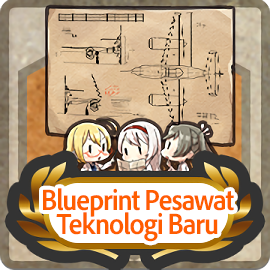
<style>
.page{position:relative;width:270px;height:270px}
.page>*{position:absolute;margin:0}
.t1{font:30px/24px "AdobeClean-Bold";letter-spacing:-0.04em;color:#ff5d00;scale:0.9 1}
</style>
<div class="page">
<p class="t1" style="left:43px;top:188px;width:191px;height:54px;text-align:center">Blueprint Pesawat<br>Teknologi Baru</p>
</div>
